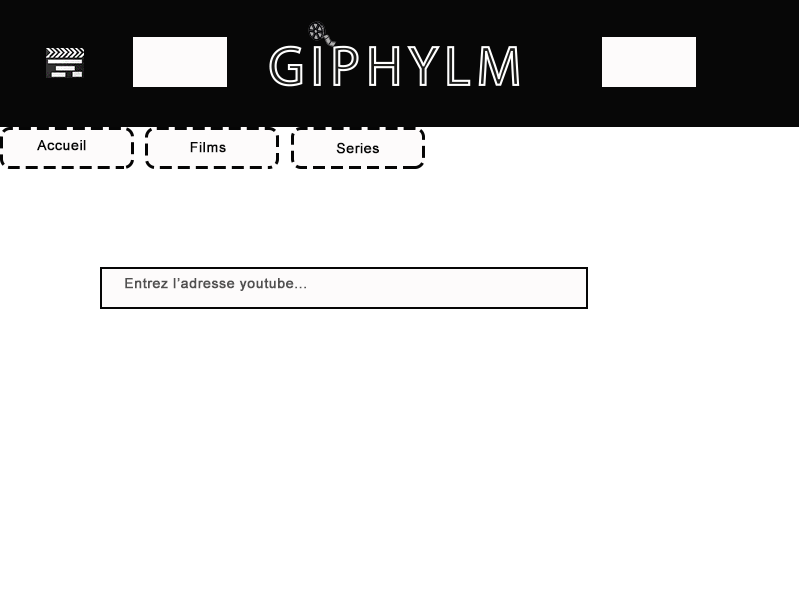
<style>
.page{position:relative;width:800px;height:600px;background:#ffffff}
.page>*{position:absolute;margin:0}
.t1{font:14px "ArialMT";letter-spacing:0.02em;color:#050505;font-weight:bold}
.t2{font:14px "ArialMT";letter-spacing:0.02em;color:#515050;font-weight:bold}
</style>
<div class="page">
<p class="t1" style="left:37px;top:140px;width:49px;height:11px">Accueil</p>
<p class="t1" style="left:190px;top:142px;width:36px;height:11px">Films</p>
<p class="t1" style="left:336px;top:142px;width:43px;height:12px">Series</p>
<p class="t2" style="left:125px;top:278px;width:181px;height:13px">Entrez l’adresse youtube...</p>
</div>
